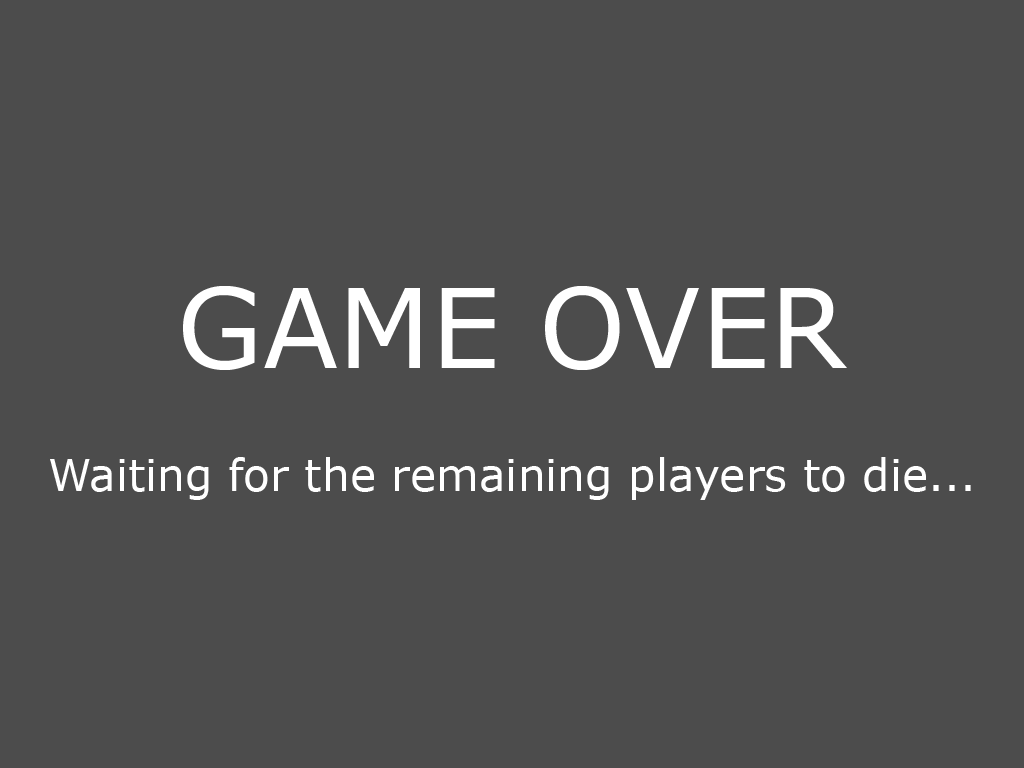
<style>
.page{position:relative;width:1024px;height:768px;background:#4c4c4c}
.page>*{position:absolute;margin:0}
.t1{font:44px "Verdana";color:#ffffff}
.t2{font:110px "Verdana";color:#ffffff}
</style>
<div class="page">
<p class="t1" style="left:50px;top:286px;width:921px;height:214px;text-align:center"><span class="t2">GAME OVER<br><br></span>Waiting for the remaining players to die...</p>
</div>
